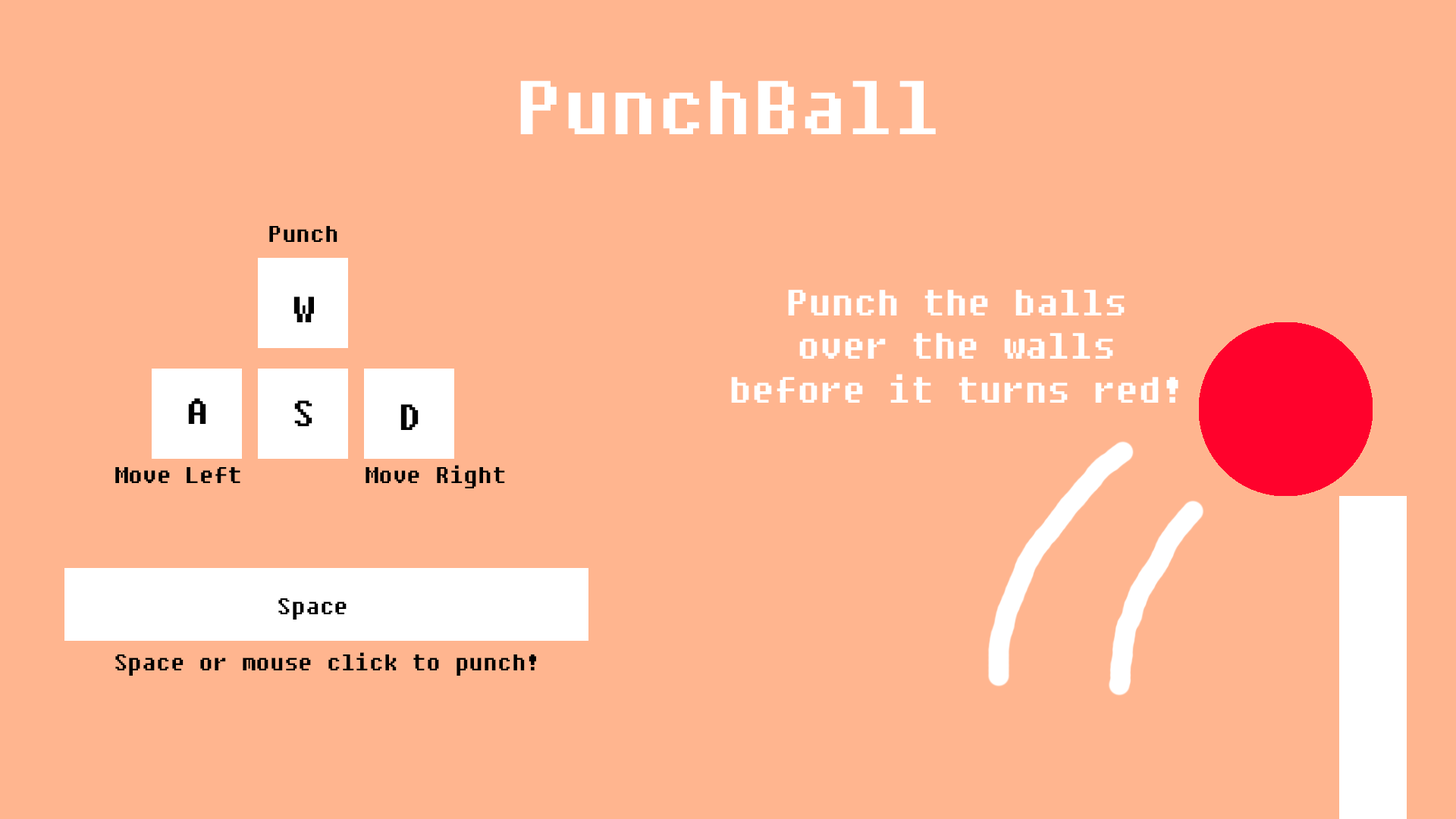
<style>
.page{position:relative;width:1456px;height:819px;background:#ffb58f}
.page>*{position:absolute;margin:0}
.t1{font:75.8px "Fixedsys";color:#ffffff}
.t2{font:22.7px "Fixedsys";color:#000000}
.t3{font:36.4px "Fixedsys";color:#ffffff}
.t4{font:36.4px "Fixedsys";color:#000000}
</style>
<div class="page">
<p class="t1" style="left:520px;top:80px;width:416px;height:54px">PunchBall</p>
<p class="t2" style="left:269px;top:226px;width:68px;height:16px">Punch</p>
<p class="t3" style="left:731px;top:290px;width:447px;height:113px;text-align:center">Punch the balls<br>over the walls<br>before it turns red!</p>
<p class="t4" style="left:293px;top:297px;width:21px;height:25px">W</p>
<p class="t4" style="left:188px;top:398px;width:18px;height:26px">A</p>
<p class="t4" style="left:294px;top:400px;width:18px;height:26px">S</p>
<p class="t4" style="left:400px;top:404px;width:19px;height:26px">D</p>
<p class="t2" style="left:366px;top:465px;width:139px;height:23px">Move Right</p>
<p class="t2" style="left:278px;top:598px;width:69px;height:22px">Space</p>
<p class="t2" style="left:115px;top:652px;width:421px;height:24px">Space or mouse click to punch!</p>
</div>
